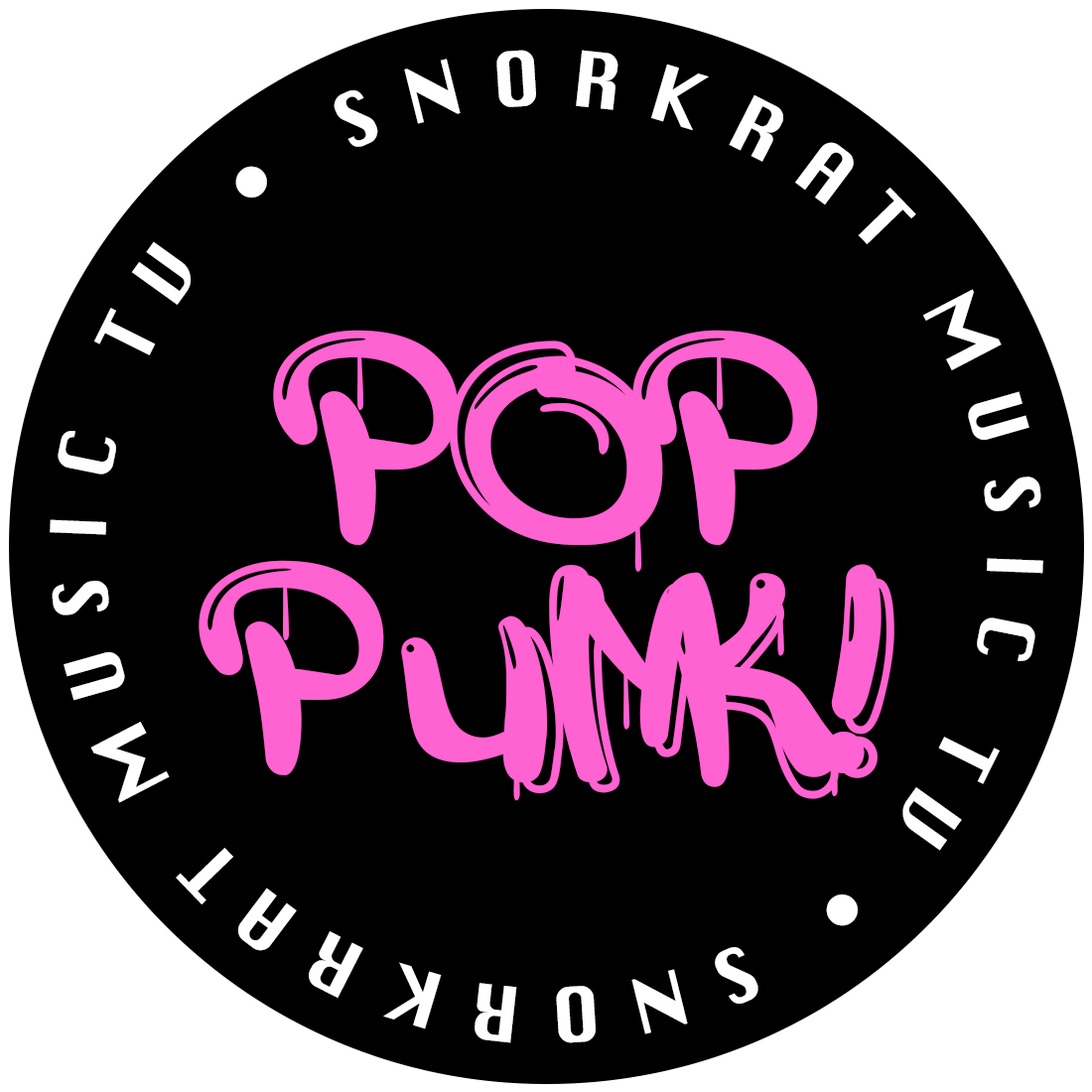
<style>
.page{position:relative;width:1092px;height:1092px;background:#000000}
.page>*{position:absolute;margin:0}
.t1{font:74.5px "Krungthep";letter-spacing:0.36em;color:#ffffff}
.t2{font:252.1px/231px "aAttackGraffiti";letter-spacing:0.02em;color:#ff62d1}
</style>
<div class="page">
<p class="t1" style="left:50px;top:50px;width:993px;height:993px;text-align:center">SNORKRAT MUSIC TV • SNORKRAT MUSIC TV •</p>
<p class="t2" style="left:199px;top:330px;width:695px;height:471px;text-align:center">POP<br>PUNK!</p>
</div>
